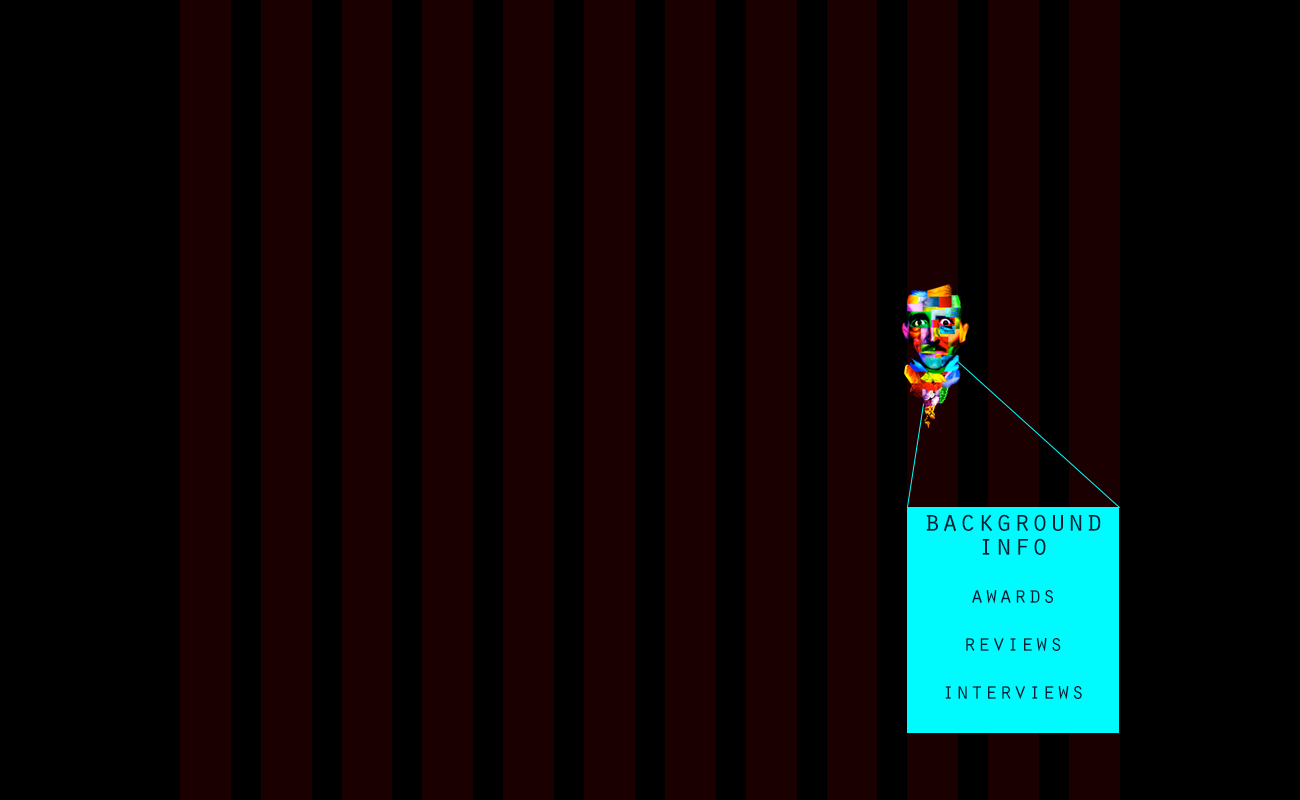
<style>
.page{position:relative;width:1300px;height:800px;background:#000000}
.page>*{position:absolute;margin:0}
.t1{font:24px/24px "OratorStd";color:#002035}
.t2{font:30px/24px "OratorStd";color:#002035}
</style>
<div class="page">
<p class="t1" style="left:926px;top:514px;width:175px;height:185px;text-align:center"><span class="t2">background<br>info<br><br></span>awards<br><br>reviews<br><br>interviews</p>
</div>
